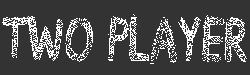
<style>
.page{position:relative;width:250px;height:75px;background:#333333}
.page>*{position:absolute;margin:0}
.t1{font:62.2px "Drawing-Guides";color:#ffffff;scale:0.82 1}
</style>
<div class="page">
<p class="t1" style="left:2px;top:14px;width:245px;height:50px">Two Player</p>
</div>
